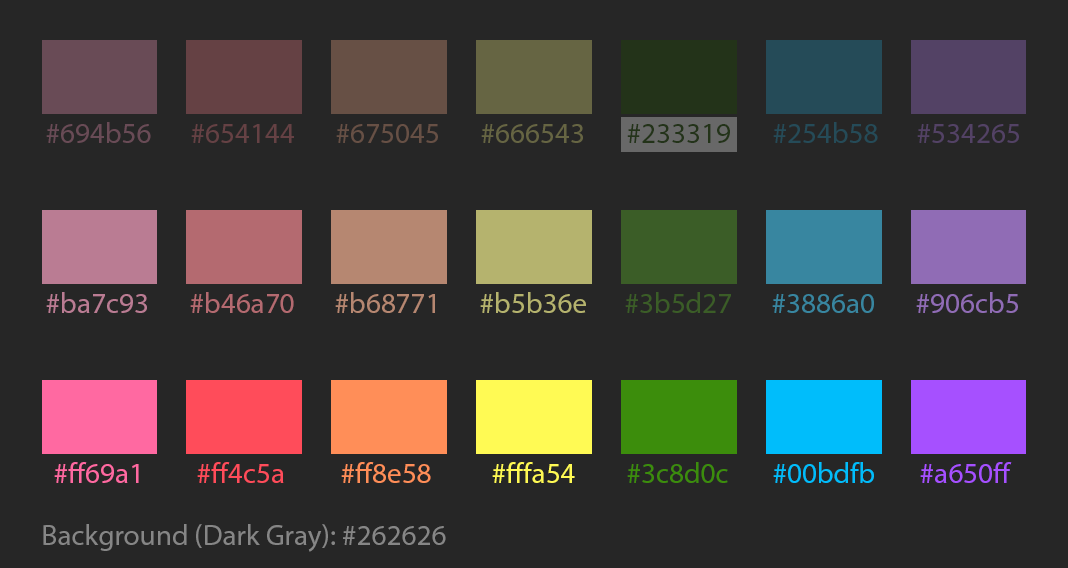
<style>
.page{position:relative;width:1068px;height:568px;background:#262626}
.page>*{position:absolute;margin:0}
.t1{font:29.2px "MyriadPro-Regular";color:#694b56}
.t2{font:29.2px "MyriadPro-Regular";color:#654144}
.t3{font:29.2px "MyriadPro-Regular";color:#675045}
.t4{font:29.2px "MyriadPro-Regular";color:#666543}
.t5{font:29.2px "MyriadPro-Regular";color:#233319}
.t6{font:29.2px "MyriadPro-Regular";color:#254b58}
.t7{font:29.2px "MyriadPro-Regular";color:#534265}
.t8{font:29.2px "MyriadPro-Regular";color:#ba7c93}
.t9{font:29.2px "MyriadPro-Regular";color:#b46a70}
.t10{font:29.2px "MyriadPro-Regular";color:#b68771}
.t11{font:29.2px "MyriadPro-Regular";color:#b5b36e}
.t12{font:29.2px "MyriadPro-Regular";color:#3b5d27}
.t13{font:29.2px "MyriadPro-Regular";color:#3886a0}
.t14{font:29.2px "MyriadPro-Regular";color:#906cb5}
.t15{font:29.2px "MyriadPro-Regular";color:#ff69a1}
.t16{font:29.2px "MyriadPro-Regular";color:#ff4c5a}
.t17{font:29.2px "MyriadPro-Regular";color:#ff8e58}
.t18{font:29.2px "MyriadPro-Regular";color:#fffa54}
.t19{font:29.2px "MyriadPro-Regular";color:#3c8d0c}
.t20{font:29.2px "MyriadPro-Regular";color:#00bdfb}
.t21{font:29.2px "MyriadPro-Regular";color:#a650ff}
.t22{font:29.2px "MyriadPro-Regular";color:#868686}
</style>
<div class="page">
<p class="t1" style="left:46px;top:122px;width:105px;height:21px">#694b56</p>
<p class="t2" style="left:191px;top:124px;width:103px;height:19px">#654144</p>
<p class="t3" style="left:336px;top:124px;width:102px;height:19px">#675045</p>
<p class="t4" style="left:481px;top:124px;width:102px;height:19px">#666543</p>
<p class="t5" style="left:627px;top:124px;width:103px;height:19px">#233319</p>
<p class="t6" style="left:773px;top:122px;width:105px;height:21px">#254b58</p>
<p class="t7" style="left:917px;top:124px;width:102px;height:19px">#534265</p>
<p class="t8" style="left:46px;top:292px;width:101px;height:21px">#ba7c93</p>
<p class="t9" style="left:190px;top:292px;width:104px;height:21px">#b46a70</p>
<p class="t10" style="left:335px;top:292px;width:100px;height:21px">#b68771</p>
<p class="t11" style="left:480px;top:292px;width:106px;height:21px">#b5b36e</p>
<p class="t12" style="left:625px;top:292px;width:106px;height:21px">#3b5d27</p>
<p class="t13" style="left:772px;top:294px;width:102px;height:19px">#3886a0</p>
<p class="t14" style="left:916px;top:292px;width:102px;height:21px">#906cb5</p>
<p class="t15" style="left:54px;top:462px;width:85px;height:21px">#ff69a1</p>
<p class="t16" style="left:197px;top:462px;width:87px;height:21px">#ff4c5a</p>
<p class="t17" style="left:341px;top:462px;width:90px;height:21px">#ff8e58</p>
<p class="t18" style="left:492px;top:462px;width:83px;height:21px">#fffa54</p>
<p class="t19" style="left:627px;top:462px;width:101px;height:21px">#3c8d0c</p>
<p class="t20" style="left:773px;top:462px;width:101px;height:21px">#00bdfb</p>
<p class="t21" style="left:920px;top:462px;width:92px;height:21px">#a650ff</p>
<p class="t22" style="left:43px;top:524px;width:403px;height:28px">Background (Dark Gray): #262626</p>
</div>
